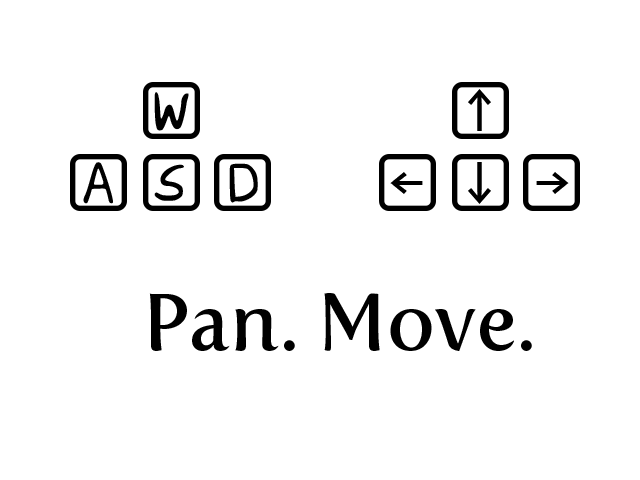
<style>
.page{position:relative;width:640px;height:480px;background:#ffffff}
.page>*{position:absolute;margin:0}
.t1{font:60px "Consolas";color:#000000}
.t2{font:80px "FertigoPro-Regular";color:#000000}
</style>
<div class="page">
<p class="t1" style="left:468px;top:89px;width:23px;height:42px">↑</p>
<p class="t1" style="left:390px;top:172px;width:33px;height:22px">←</p>
<p class="t1" style="left:468px;top:162px;width:23px;height:42px">↓</p>
<p class="t1" style="left:536px;top:172px;width:33px;height:22px">→</p>
<p class="t2" style="left:149px;top:293px;width:383px;height:58px">Pan. Move.</p>
</div>
